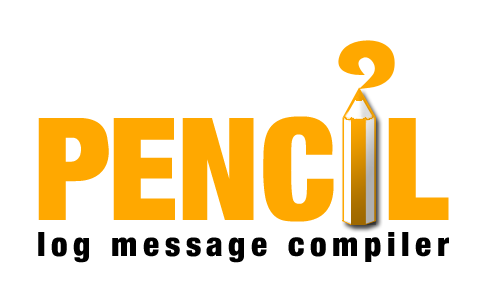
<style>
.page{position:relative;width:483px;height:300px;background:#ffffff}
.page>*{position:absolute;margin:0}
.t1{font:141.7px "BasicSansHeavySFBold";color:#ffa800}
.t2{font:33.3px "BasicSansHeavySFBold";letter-spacing:0.168em;color:#000000}
</style>
<div class="page">
<p class="t1" style="left:38px;top:116px;width:296px;height:106px">PENC</p>
<p class="t1" style="left:388px;top:118px;width:61px;height:102px">L</p>
<p class="t2" style="left:38px;top:232px;width:411px;height:31px">log message compiler</p>
</div>
